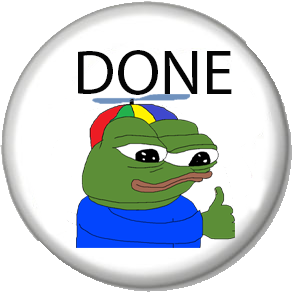
<style>
.page{position:relative;width:300px;height:299px;background:#ffffff}
.page>*{position:absolute;margin:0}
.t1{font:64px "MyriadPro-Regular";color:#050505}
</style>
<div class="page">
<p class="t1" style="left:78px;top:50px;width:154px;height:45px">DONE</p>
</div>
